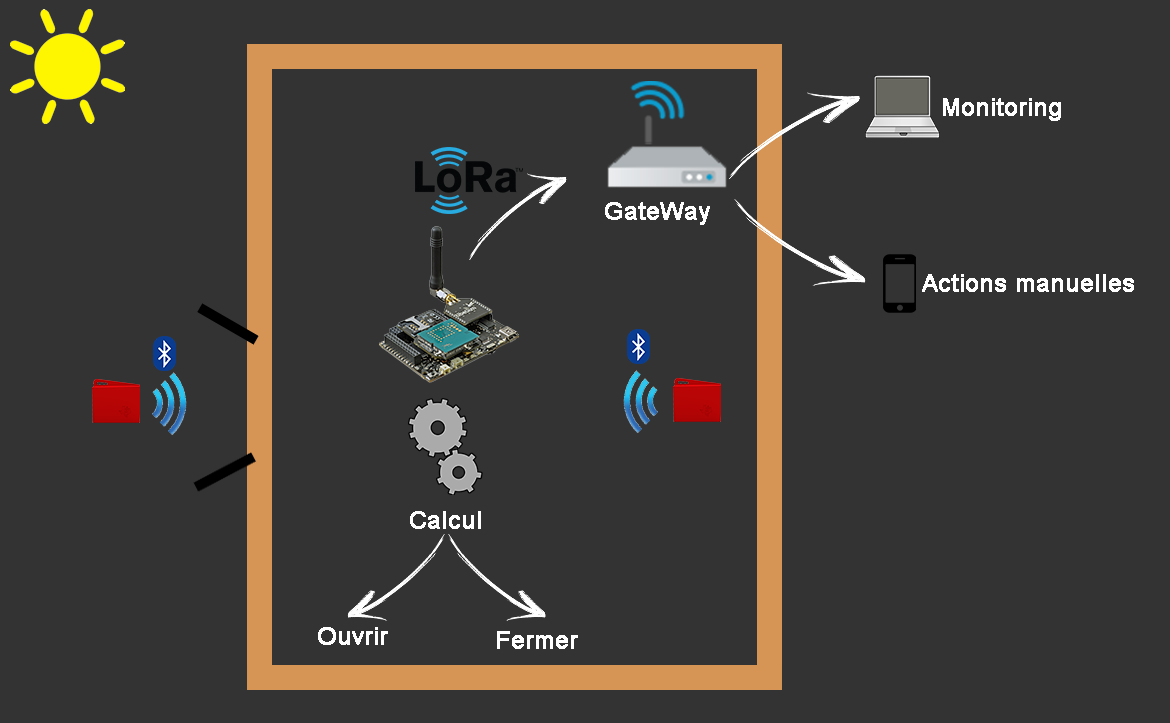
<style>
.page{position:relative;width:1170px;height:723px;background:#333333}
.page>*{position:absolute;margin:0}
.t1{font:24px "ArialMT";color:#ffffff;font-weight:bold}
</style>
<div class="page">
<p class="t1" style="left:943px;top:98px;width:118px;height:23px">Monitoring</p>
<p class="t1" style="left:605px;top:202px;width:105px;height:23px">GateWay</p>
<p class="t1" style="left:922px;top:274px;width:212px;height:18px">Actions manuelles</p>
<p class="t1" style="left:410px;top:511px;width:71px;height:18px">Calcul</p>
<p class="t1" style="left:318px;top:627px;width:70px;height:18px">Ouvrir</p>
<p class="t1" style="left:497px;top:631px;width:81px;height:18px">Fermer</p>
</div>
